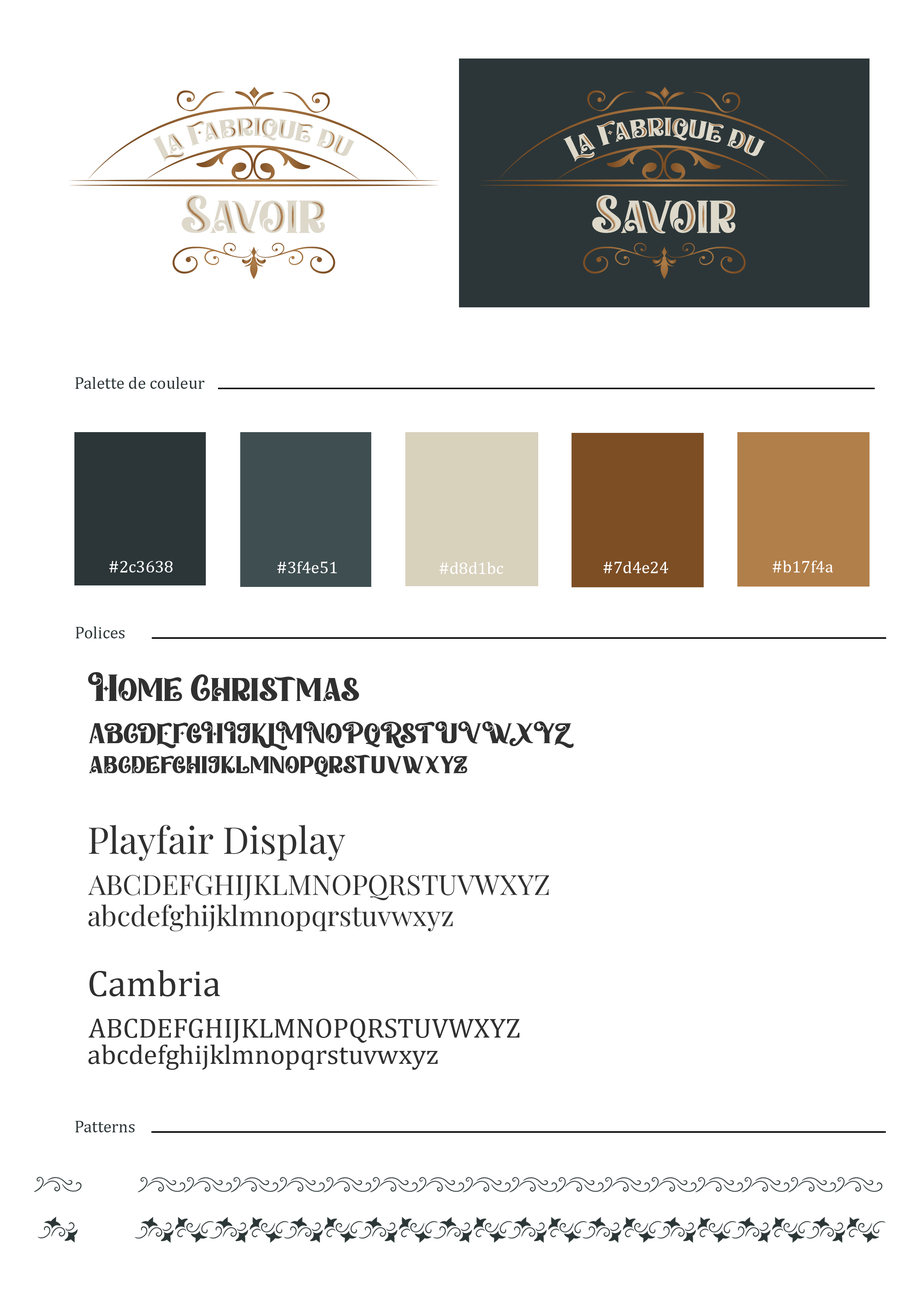
<style>
.page{position:relative;width:918px;height:1299px;background:#ffffff}
.page>*{position:absolute;margin:0}
.t1{font:17px "Cambria";color:#2c3638}
.t2{font:17px "Cambria";color:#ffffff}
.t3{font:37px "HomeChristmas-Regular";color:#303030}
.t4{font:27.8px "HomeChristmas-Regular";color:#303030}
.t5{font:37px "PlayfairDisplay-Regular";color:#303030}
.t6{font:27.8px "PlayfairDisplay-Regular";color:#303030}
.t7{font:37px "Cambria";color:#303030}
.t8{font:27.8px "Cambria";color:#303030}
</style>
<div class="page">
<p class="t1" style="left:75px;top:377px;width:130px;height:12px">Palette de couleur</p>
<p class="t2" style="left:109px;top:561px;width:64px;height:11px">#2c3638</p>
<p class="t2" style="left:277px;top:561px;width:60px;height:12px">#3f4e51</p>
<p class="t2" style="left:439px;top:562px;width:64px;height:12px">#d8d1bc</p>
<p class="t2" style="left:603px;top:561px;width:65px;height:12px">#7d4e24</p>
<p class="t2" style="left:773px;top:561px;width:60px;height:11px">#b17f4a</p>
<p class="t1" style="left:76px;top:626px;width:49px;height:12px">Polices</p>
<p class="t3" style="left:88px;top:672px;width:271px;height:29px">Home Christmas</p>
<p class="t4" style="left:89px;top:721px;width:485px;height:29px">ABCDEFGHIJKLMNOPQRSTUVWXYZ</p>
<p class="t4" style="left:89px;top:755px;width:379px;height:22px">abcdefghijklmnopqrstuvwxyz</p>
<p class="t5" style="left:89px;top:824px;width:256px;height:37px">Playfair Display</p>
<p class="t6" style="left:88px;top:874px;width:461px;height:26px">ABCDEFGHIJKLMNOPQRSTUVWXYZ</p>
<p class="t6" style="left:88px;top:904px;width:365px;height:27px">abcdefghijklmnopqrstuvwxyz</p>
<p class="t7" style="left:89px;top:970px;width:131px;height:26px">Cambria</p>
<p class="t8" style="left:88px;top:1018px;width:432px;height:25px">ABCDEFGHIJKLMNOPQRSTUVWXYZ</p>
<p class="t8" style="left:88px;top:1044px;width:350px;height:26px">abcdefghijklmnopqrstuvwxyz</p>
<p class="t1" style="left:75px;top:1121px;width:60px;height:11px">Patterns</p>
</div>
